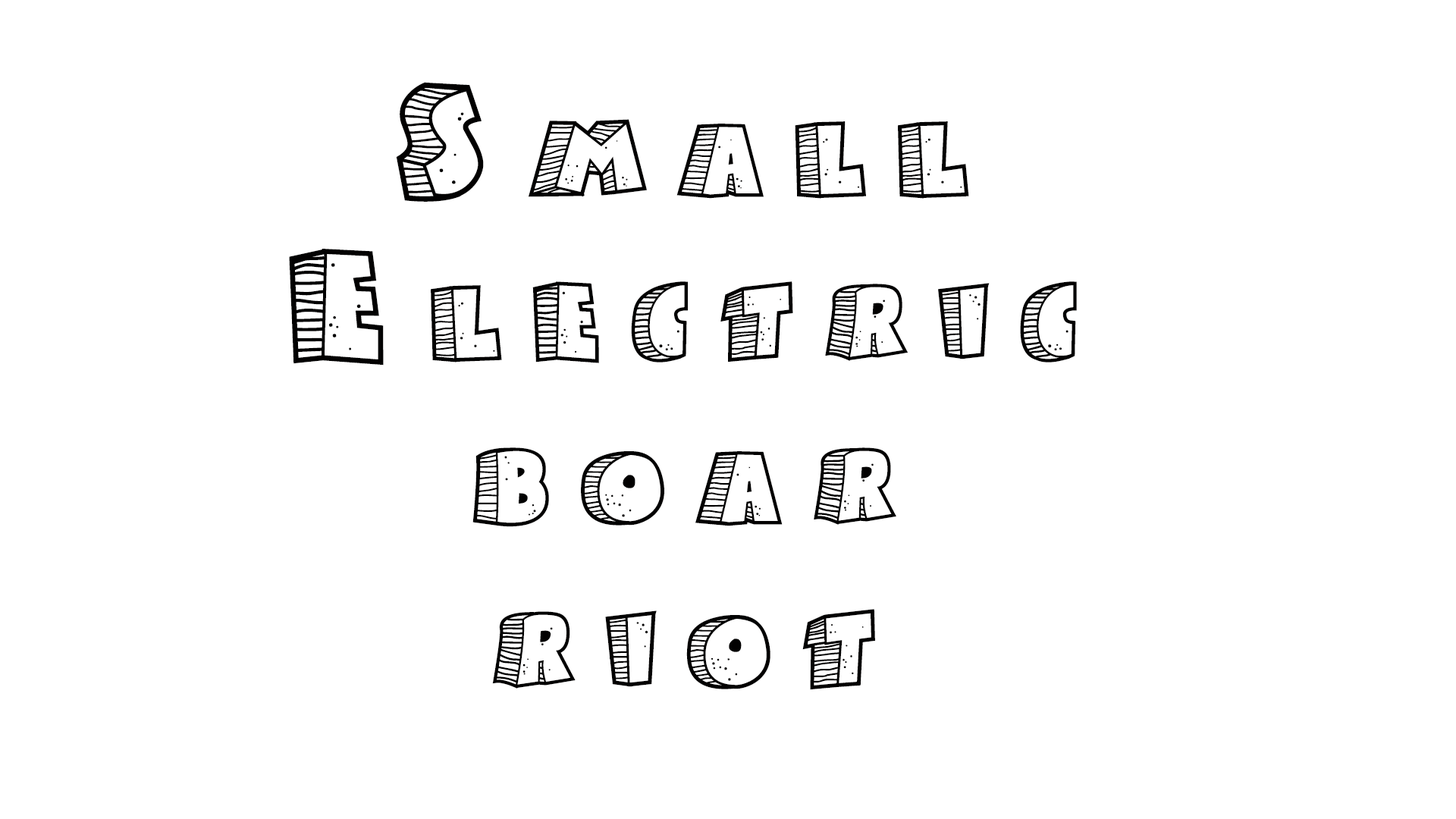
<style>
.page{position:relative;width:1456px;height:819px;background:#ffffff}
.page>*{position:absolute;margin:0}
.t1{font:136.5px "StoneyBilly";letter-spacing:0.4em;color:#020101;font-variant:small-caps}
</style>
<div class="page">
<p class="t1" style="left:289px;top:82px;width:788px;height:608px;text-align:center">Small<br>Electric<br>boar<br>riot</p>
</div>
